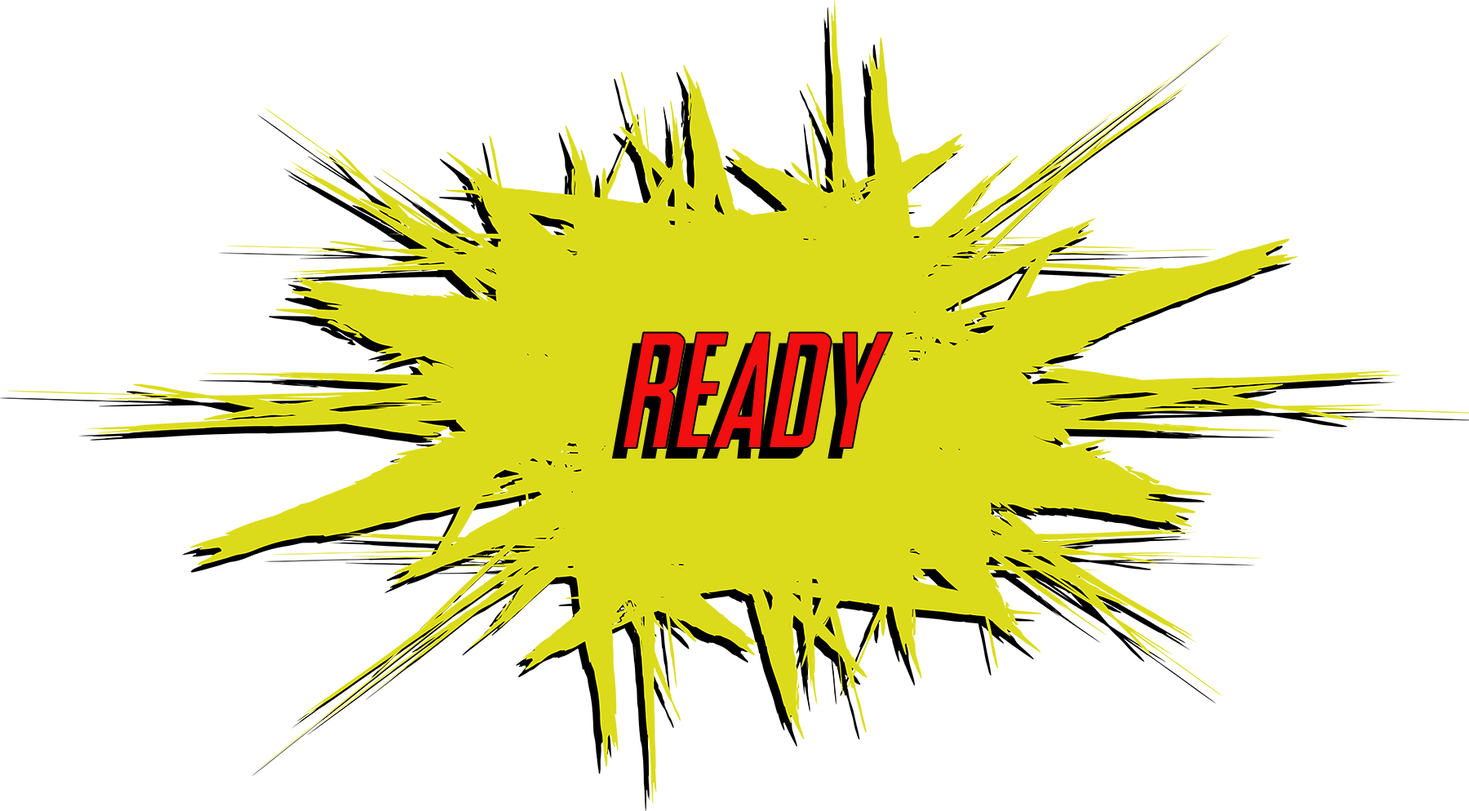
<style>
.page{position:relative;width:1469px;height:811px;background:#ffffff}
.page>*{position:absolute;margin:0}
.t1{font:164.8px "SNES-Italic";color:#f10f0f}
</style>
<div class="page">
<p class="t1" style="left:622px;top:332px;width:271px;height:116px">Ready</p>
</div>
